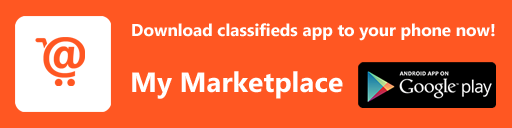
<style>
.page{position:relative;width:512px;height:128px;background:#ff5722}
.page>*{position:absolute;margin:0}
.t1{font:17px "SegoeUI-Bold";color:#ffffff}
.t2{font:28px "SegoeUI-Bold";color:#ffffff}
</style>
<div class="page">
<p class="t1" style="left:132px;top:23px;width:363px;height:18px">Download classifieds app to your phone now!</p>
<p class="t2" style="left:132px;top:71px;width:211px;height:28px">My Marketplace</p>
</div>
